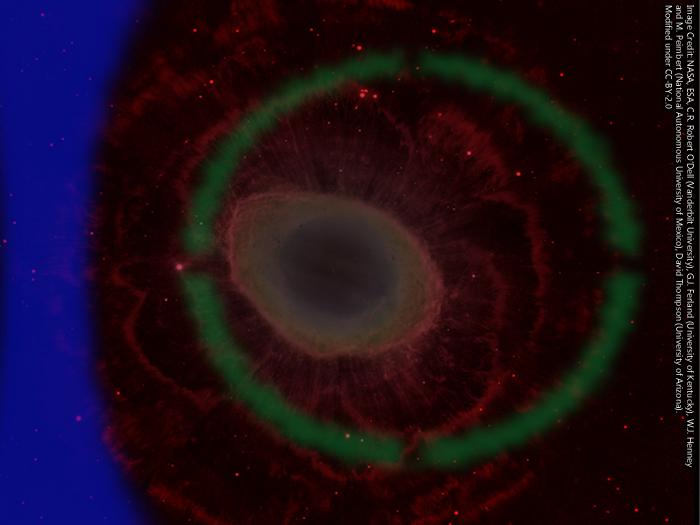
<style>
.page{position:relative;width:700px;height:525px}
.page>*{position:absolute;margin:0}
.t1{font:9px "Gadugi";color:#ffffff}
</style>
<div class="page">
<p class="t1" style="left:665px;top:5px;width:29px;height:463px;rotate:90deg">Image Credit: NASA, ESA, C.R. Robert O’Dell (Vanderbilt University), G.J. Ferland (University of Kentucky), W.J. Henney <br>and M. Peimbert (National Autonomous University of Mexico), David Thompson (University of Arizona).  <br>Modified under CC-BY-2.0</p>
</div>
